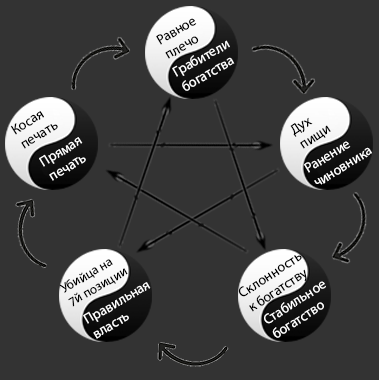
<style>
.page{position:relative;width:379px;height:380px;background:#333333}
.page>*{position:absolute;margin:0}
.t1{font:14px "MyriadPro-Regular";color:#000000}
.t2{font:14px "MyriadPro-Regular";color:#ffffff}
.t3{font:13.1px "MyriadPro-Regular";color:#000000}
</style>
<div class="page">
<p class="t1" style="left:156px;top:18px;width:43px;height:41px;rotate:-30deg">Равное<br>плечо</p>
<p class="t2" style="left:172px;top:40px;width:63px;height:51px;rotate:-30deg">Грабители<br>богатства</p>
<p class="t1" style="left:10px;top:111px;width:48px;height:38px;rotate:-32deg">Косая<br>печать</p>
<p class="t1" style="left:290px;top:117px;width:41px;height:32px;rotate:-34deg">Дух<br>пищи</p>
<p class="t2" style="left:39px;top:137px;width:47px;height:44px;rotate:-32deg">Прямая<br>печать</p>
<p class="t2" style="left:304px;top:141px;width:68px;height:44px;rotate:-31deg">Ранение<br>чиновника</p>
<p class="t1" style="left:238px;top:255px;width:69px;height:57px;rotate:-34deg">Склонность<br>к богатству</p>
<p class="t3" style="left:59px;top:259px;width:69px;height:48px;rotate:-30deg">Убийца на<br>7й позиции</p>
<p class="t2" style="left:264px;top:281px;width:62px;height:57px;rotate:-32deg">Стабильное<br>богатство</p>
<p class="t2" style="left:83px;top:282px;width:68px;height:57px;rotate:-30deg">Правильная<br>власть</p>
</div>
